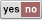
<style>
.page{position:relative;width:42px;height:20px;background:#dedede}
.page>*{position:absolute;margin:0}
.t1{font:10px "ArialMT";color:#000000;font-weight:bold}
.t2{font:10px "ArialMT";color:#ffffff;font-weight:bold}
</style>
<div class="page">
<p class="t1" style="left:3px;top:7px;width:17px;height:8px">yes</p>
<p class="t2" style="left:25px;top:7px;width:12px;height:6px">no</p>
</div>
